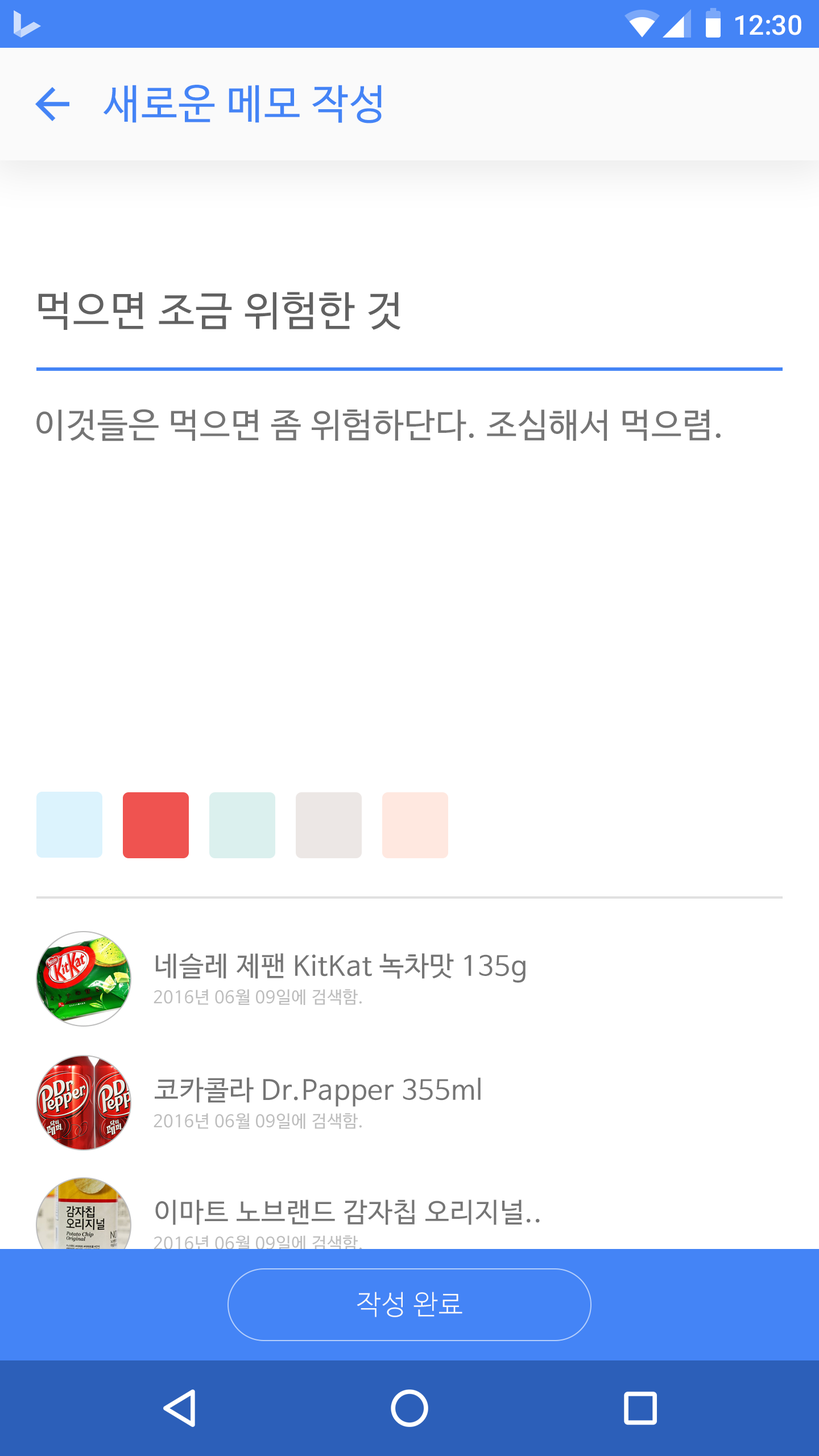
<style>
.page{position:relative;width:819px;height:1456px;background:#ffffff}
.page>*{position:absolute;margin:0}
.t1{font:27.3px "Roboto-Medium";color:#ffffff}
.t2{font:40.9px "NanumBarunGothic";letter-spacing:0.025em;color:#4484f6}
.t3{font:40.9px "NanumBarunGothic";letter-spacing:0.025em;color:#616161}
.t4{font:34.1px "NanumBarunGothic";letter-spacing:0.025em;color:#757575}
.t5{font:27.3px "NanumBarunGothic";letter-spacing:0.025em;color:#757575}
.t6{font:17.1px "NanumBarunGothic";letter-spacing:0.025em;color:#bdbdbd}
.t7{font:27.3px "NanumBarunGothicLight";letter-spacing:0.025em;color:#fafafa}
</style>
<div class="page">
<p class="t1" style="left:735px;top:15px;width:66px;height:20px">12:30</p>
<p class="t2" style="left:103px;top:85px;width:279px;height:38px">새로운 메모 작성</p>
<p class="t3" style="left:38px;top:292px;width:363px;height:38px">먹으면 조금 위험한 것</p>
<p class="t4" style="left:36px;top:409px;width:685px;height:32px">이것들은 먹으면 좀 위험하단다. 조심해서 먹으렴.</p>
<p class="t5" style="left:156px;top:953px;width:370px;height:30px">네슬레 제팬 KitKat 녹차맛 135g</p>
<p class="t6" style="left:154px;top:989px;width:208px;height:16px">2016년 06월 09일에 검색함.</p>
<p class="t5" style="left:155px;top:1077px;width:326px;height:30px">코카콜라 Dr.Papper 355ml</p>
<p class="t6" style="left:154px;top:1113px;width:208px;height:16px">2016년 06월 09일에 검색함.</p>
<p class="t5" style="left:155px;top:1199px;width:385px;height:26px">이마트 노브랜드 감자칩 오리지널..</p>
<p class="t6" style="left:154px;top:1235px;width:208px;height:16px">2016년 06월 09일에 검색함.</p>
<p class="t7" style="left:357px;top:1292px;width:105px;height:25px">작성 완료</p>
</div>
